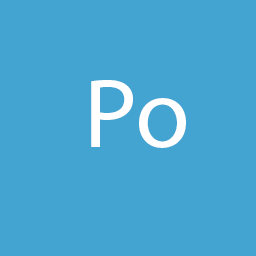
<style>
.page{position:relative;width:256px;height:256px;background:#44a4d1}
.page>*{position:absolute;margin:0}
.t1{font:100px "MyriadPro-Regular";color:#ffffff}
</style>
<div class="page">
<p class="t1" style="left:91px;top:80px;width:95px;height:68px">Po</p>
</div>
